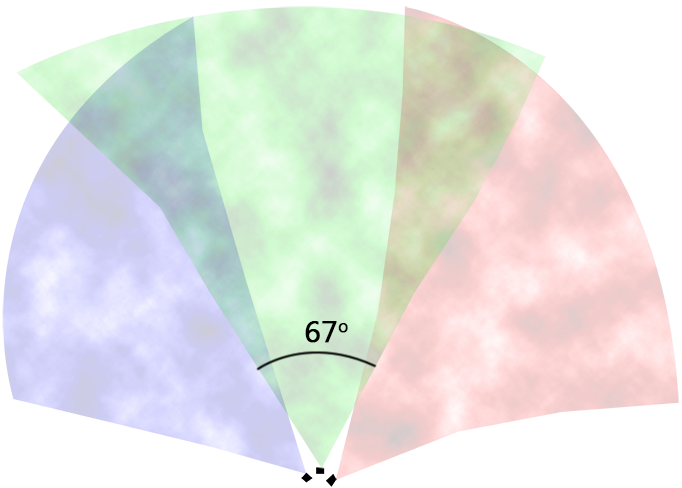
<style>
.page{position:relative;width:682px;height:488px;background:#ffffff}
.page>*{position:absolute;margin:0}
.t1{font:30px "MicrosoftTaiLe";color:#000000;font-weight:bold}
</style>
<div class="page">
<p class="t1" style="left:305px;top:321px;width:43px;height:22px">67o</p>
</div>
